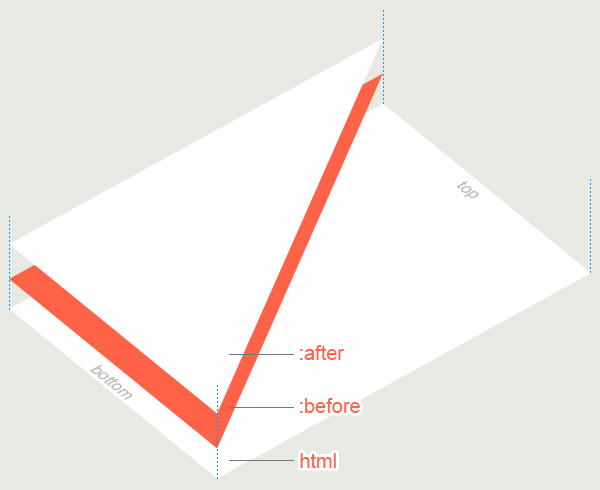
<style>
.page{position:relative;width:600px;height:490px;background:#e8e9e3}
.page>*{position:absolute;margin:0}
.t1{font:17px "ArialMT";color:#b8b9b2;scale:0.91 1}
.t2{font:20px "ArialMT";color:#ff6347}
</style>
<div class="page">
<p class="t1" style="left:457px;top:181px;width:22px;height:17px;rotate:37deg">top</p>
<p class="t2" style="left:300px;top:345px;width:44px;height:15px">:after</p>
<p class="t1" style="left:90px;top:365px;width:43px;height:35px;rotate:40deg">bottom</p>
<p class="t2" style="left:300px;top:398px;width:60px;height:15px">:before</p>
<p class="t2" style="left:300px;top:453px;width:36px;height:15px">html</p>
</div>
